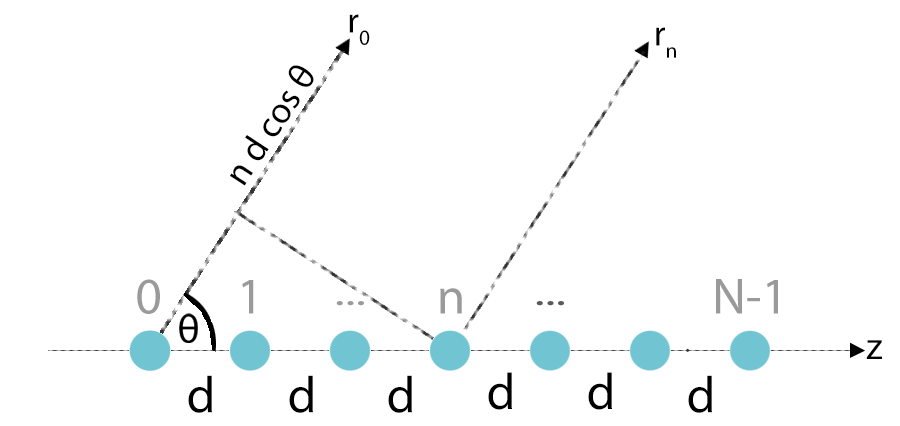
<style>
.page{position:relative;width:900px;height:426px;background:#ffffff}
.page>*{position:absolute;margin:0}
.t1{font:36.7px "MyriadPro-Regular";color:#000000}
.t2{font:88.1px "MyriadPro-Regular";color:#9a9a9a}
.t3{font:57.3px "MyriadPro-Regular";color:#9a9a9a;scale:1.54 1}
.t4{font:57.3px "MyriadPro-Regular";color:#5b5b5b;scale:1.54 1}
.t5{font:66.2px "MyriadPro-Regular";color:#000000}
.t6{font:88.1px "MyriadPro-Regular";color:#000000}
</style>
<div class="page">
<p class="t1" style="left:349px;top:14px;width:21px;height:31px">r0</p>
<p class="t1" style="left:656px;top:27px;width:20px;height:31px">rn</p>
<p class="t1" style="left:229px;top:65px;width:85px;height:121px;rotate:-57deg">n d cos θ</p>
<p class="t2" style="left:137px;top:279px;width:23px;height:35px">0</p>
<p class="t2" style="left:242px;top:280px;width:12px;height:34px">1</p>
<p class="t2" style="left:716px;top:279px;width:62px;height:35px">N-1</p>
<p class="t2" style="left:440px;top:288px;width:22px;height:26px">n</p>
<p class="t3" style="left:336px;top:301px;width:28px;height:5px">...</p>
<p class="t4" style="left:536px;top:301px;width:28px;height:5px">...</p>
<p class="t4" style="left:536px;top:301px;width:28px;height:5px">...</p>
<p class="t5" style="left:866px;top:340px;width:16px;height:19px">z</p>
<p class="t6" style="left:188px;top:375px;width:24px;height:38px">d</p>
<p class="t6" style="left:289px;top:375px;width:24px;height:38px">d</p>
<p class="t6" style="left:388px;top:375px;width:24px;height:38px">d</p>
<p class="t6" style="left:488px;top:372px;width:24px;height:38px">d</p>
<p class="t6" style="left:588px;top:372px;width:24px;height:38px">d</p>
<p class="t6" style="left:688px;top:375px;width:24px;height:38px">d</p>
</div>
